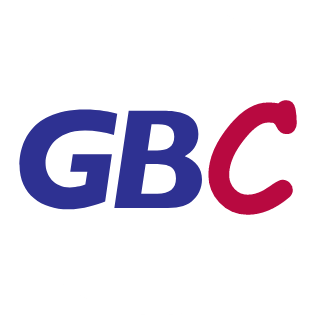
<style>
.page{position:relative;width:316px;height:316px;background:#ffffff}
.page>*{position:absolute;margin:0}
.t1{font:151.7px "ComicSansMS-Bold";color:#b80940}
.t2{font:143.7px "GillSans-HeavyItalic";letter-spacing:-0.067em;color:#2e3192}
</style>
<div class="page">
<p class="t1" style="left:208px;top:100px;width:89px;height:115px">C</p>
<p class="t2" style="left:19px;top:109px;width:183px;height:101px">GB</p>
</div>
